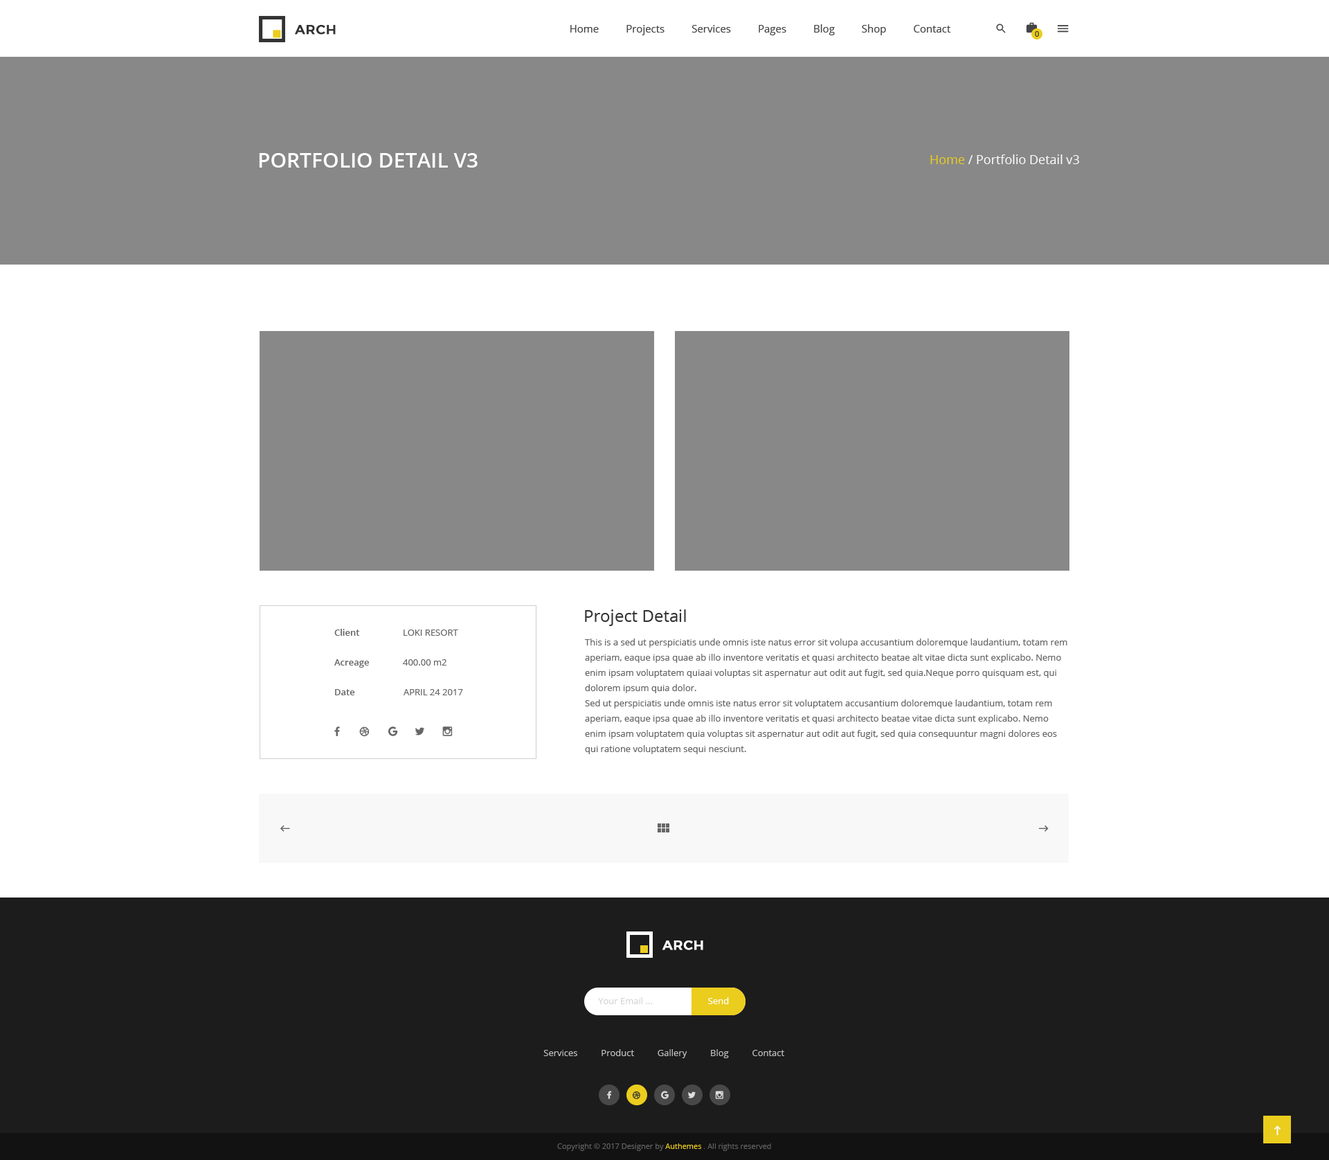
<style>
.page{position:relative;width:1329px;height:1160px;background:#ffffff}
.page>*{position:absolute;margin:0}
.t1{font:13.2px "Montserrat-Medium";letter-spacing:0.025em;color:#333333;text-transform:uppercase;font-weight:bold}
.t2{font:10.4px "OpenSans";color:#444444}
.t3{font:7.6px "OpenSans";color:#333333}
.t4{font:20.8px "OpenSans-Semibold";color:#ffffff;text-transform:uppercase}
.t5{font:12.5px "OpenSans";color:#ffffff}
.t6{font:12.5px "OpenSans";color:#ebcd1e}
.t7{font:16.6px "OpenSans";color:#333333}
.t8{font:16.6px "OpenSans";color:#333333;text-transform:uppercase}
.t9{font:9px "OpenSans-Semibold";color:#666666}
.t10{font:9px "OpenSans";color:#666666;text-transform:uppercase}
.t11{font:9px/15.2px "OpenSans";color:#666666}
.t12{font:9px "OpenSans";color:#666666}
.t13{font:13.2px "Montserrat-Medium";letter-spacing:0.025em;color:#ffffff;text-transform:uppercase;font-weight:bold}
.t14{font:9px "OpenSans";color:#d6d6d6}
.t15{font:9px "OpenSans";color:#ffffff}
.t16{font:9px "OpenSans";color:#c2c2c2}
.t17{font:7.6px "OpenSans";color:#626262}
.t18{font:7.6px "OpenSans";color:#ebcd1e}
</style>
<div class="page">
<p class="t1" style="left:295px;top:25px;width:41px;height:10px">arch</p>
<p class="t2" style="left:570px;top:24px;width:381px;height:11px">Home          Projects          Services          Pages          Blog          Shop          Contact</p>
<p class="t3" style="left:1035px;top:31px;width:4px;height:6px">0</p>
<p class="t4" style="left:259px;top:153px;width:219px;height:15px">Portfolio detail v3</p>
<p class="t5" style="left:930px;top:154px;width:149px;height:10px"><span class="t6">Home</span> / Portfolio Detail v3</p>
<p class="t7" style="left:585px;top:609px;width:101px;height:17px"><span class="t8">P</span>roject Detail</p>
<p class="t9" style="left:334px;top:629px;width:26px;height:7px">Client</p>
<p class="t10" style="left:404px;top:629px;width:54px;height:7px">Loki Resort</p>
<p class="t11" style="left:585px;top:638px;width:483px;height:116px">This is a sed ut perspiciatis unde omnis iste natus error sit volupa accusantium doloremque laudantium, totam rem aperiam, eaque ipsa quae ab illo inventore veritatis et quasi architecto beatae alt vitae dicta sunt explicabo. Nemo enim ipsam voluptatem quiaai voluptas sit aspernatur aut odit aut fugit, sed quia.Neque porro quisquam est, qui dolorem ipsum quia dolor.<br>Sed ut perspiciatis unde omnis iste natus error sit voluptatem accusantium doloremque laudantium, totam rem aperiam, eaque ipsa quae ab illo inventore veritatis et quasi architecto beatae vitae dicta sunt explicabo. Nemo enim ipsam voluptatem quia voluptas sit aspernatur aut odit aut fugit, sed quia consequuntur magni dolores eos qui ratione voluptatem sequi nesciunt.</p>
<p class="t9" style="left:334px;top:659px;width:35px;height:8px">Acreage</p>
<p class="t12" style="left:403px;top:659px;width:44px;height:6px">400.00 m2</p>
<p class="t9" style="left:335px;top:689px;width:20px;height:6px">Date</p>
<p class="t10" style="left:404px;top:689px;width:59px;height:6px">April 24 2017</p>
<p class="t13" style="left:663px;top:940px;width:40px;height:10px">arch</p>
<p class="t14" style="left:598px;top:997px;width:55px;height:7px">Your Email ...</p>
<p class="t15" style="left:708px;top:997px;width:21px;height:7px">Send</p>
<p class="t16" style="left:543px;top:1049px;width:241px;height:9px">Services          Product          Gallery          Blog          Contact</p>
<p class="t17" style="left:557px;top:1143px;width:214px;height:8px">Copyright © 2017 Designer by <span class="t18">Authemes </span>. All rights reserved</p>
</div>
